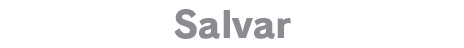
<style>
.page{position:relative;width:464px;height:48px;background:#ffffff}
.page>*{position:absolute;margin:0}
.t1{font:36px "RodinPro-EB";color:#8b8c92}
</style>
<div class="page">
<p class="t1" style="left:174px;top:9px;width:117px;height:30px">Salvar</p>
</div>
